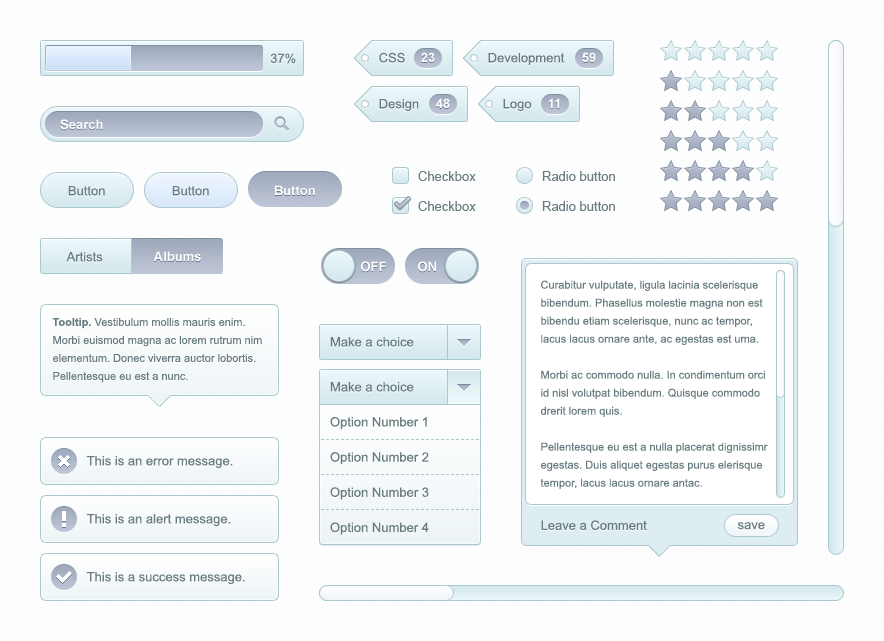
<style>
.page{position:relative;width:884px;height:641px;background:#ffffff}
.page>*{position:absolute;margin:0}
.t1{font:13px "ArialMT";color:#677d81}
.t2{font:13px "Arial-BoldMT";color:#fefefe}
.t3{font:13px "Arial-BoldMT";color:#fefeff}
.t4{font:13px "Arial-BoldMT";color:#ffffff}
.t5{font:11px/18px "ArialMT";color:#677d81}
.t6{font:11px/18px "Arial-BoldMT";color:#677d81}
.t7{font:13px/31px "ArialMT";color:#677d81}
</style>
<div class="page">
<p class="t1" style="left:270px;top:53px;width:26px;height:11px">37%</p>
<p class="t1" style="left:379px;top:52px;width:26px;height:11px">CSS</p>
<p class="t2" style="left:421px;top:52px;width:14px;height:10px">23</p>
<p class="t1" style="left:488px;top:53px;width:77px;height:12px">Development</p>
<p class="t2" style="left:582px;top:52px;width:14px;height:10px">59</p>
<p class="t1" style="left:379px;top:99px;width:40px;height:13px">Design</p>
<p class="t2" style="left:436px;top:98px;width:14px;height:10px">48</p>
<p class="t1" style="left:503px;top:99px;width:29px;height:13px">Logo</p>
<p class="t2" style="left:548px;top:98px;width:12px;height:10px">11</p>
<p class="t3" style="left:60px;top:119px;width:43px;height:11px">Search</p>
<p class="t1" style="left:418px;top:171px;width:58px;height:10px">Checkbox</p>
<p class="t1" style="left:542px;top:171px;width:73px;height:10px">Radio button</p>
<p class="t4" style="left:274px;top:185px;width:41px;height:10px">Button</p>
<p class="t1" style="left:68px;top:186px;width:37px;height:10px">Button</p>
<p class="t1" style="left:172px;top:186px;width:37px;height:10px">Button</p>
<p class="t1" style="left:418px;top:201px;width:58px;height:10px">Checkbox</p>
<p class="t1" style="left:542px;top:201px;width:73px;height:10px">Radio button</p>
<p class="t1" style="left:66px;top:252px;width:37px;height:10px">Artists</p>
<p class="t4" style="left:153px;top:251px;width:48px;height:10px">Albums</p>
<p class="t4" style="left:361px;top:261px;width:25px;height:11px">OFF</p>
<p class="t4" style="left:418px;top:261px;width:18px;height:11px">ON</p>
<p class="t5" style="left:540px;top:280px;width:228px;height:209px">Curabitur vulputate, ligula lacinia scelerisque<br>bibendum. Phasellus molestie magna non est bibendu etiam scelerisque, nunc ac tempor, lacus lacus ornare ante, ac egestas est uma.<br><br>Morbi ac commodo nulla. In condimentum orci id nisl volutpat bibendum. Quisque commodo drerit lorem quis.<br><br>Pellentesque eu est a nulla placerat dignissimr egestas. Duis aliquet egestas purus elerisque tempor, lacus lacus ornare antac.</p>
<p class="t5" style="left:52px;top:318px;width:210px;height:65px"><span class="t6">Tooltip.</span> Vestibulum mollis mauris enim. Morbi euismod magna ac lorem rutrum nim elementum. Donec viverra auctor lobortis. Pellentesque eu est a nunc.</p>
<p class="t1" style="left:330px;top:337px;width:84px;height:10px">Make a choice</p>
<p class="t1" style="left:330px;top:382px;width:84px;height:10px">Make a choice</p>
<p class="t7" style="left:330px;top:416px;width:99px;height:119px">Option Number 1<br>Option Number 2<br>Option Number 3<br>Option Number 4</p>
<p class="t1" style="left:86px;top:456px;width:147px;height:13px">This is an error message.</p>
<p class="t1" style="left:86px;top:514px;width:145px;height:13px">This is an alert message.</p>
<p class="t1" style="left:541px;top:520px;width:106px;height:11px">Leave a Comment</p>
<p class="t1" style="left:737px;top:522px;width:28px;height:8px">save</p>
<p class="t1" style="left:86px;top:572px;width:159px;height:13px">This is a success message.</p>
</div>
